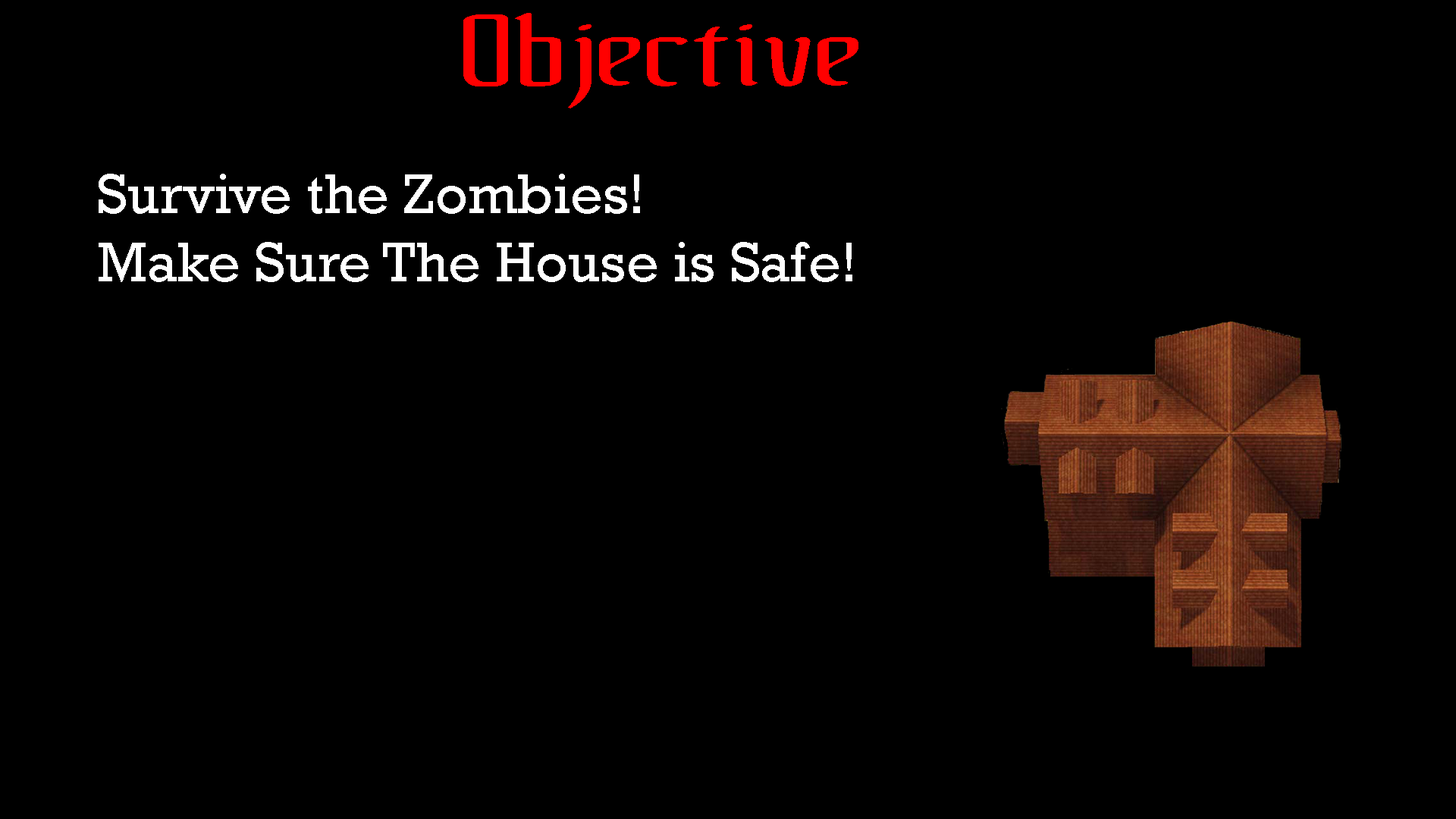
<style>
.page{position:relative;width:1456px;height:819px;background:#000000}
.page>*{position:absolute;margin:0}
.t1{font:94.8px "!TheBlackBloc";color:#ff0000}
.t2{font:56.9px "Rockwell";color:#ffffff}
</style>
<div class="page">
<p class="t1" style="left:463px;top:13px;width:395px;height:95px">Objective</p>
<p class="t2" style="left:99px;top:174px;width:753px;height:108px">Survive the Zombies!<br>Make Sure The House is Safe!</p>
</div>
